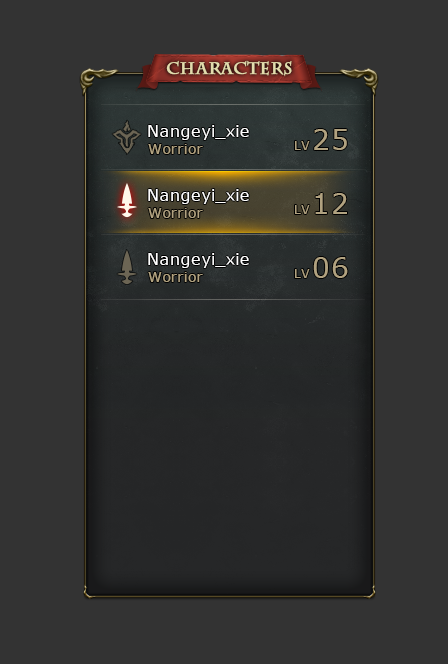
<style>
.page{position:relative;width:448px;height:664px;background:#333333}
.page>*{position:absolute;margin:0}
.t1{font:16px "CharlemagneStd-Bold";letter-spacing:0.03em;color:#e3dcad;font-weight:bold}
.t2{font:16px "Verdana";letter-spacing:0.03em;color:#ffffff}
.t3{font:28px "Verdana";letter-spacing:0.03em;color:#b1a280}
.t4{font:14px "Verdana";letter-spacing:0.03em;color:#b1a280}
.t5{font:12px "Verdana";letter-spacing:0.03em;color:#b1a280}
</style>
<div class="page">
<p class="t1" style="left:166px;top:60px;width:126px;height:16px">Characters</p>
<p class="t2" style="left:148px;top:125px;width:101px;height:15px">Nangeyi_xie</p>
<p class="t3" style="left:314px;top:129px;width:33px;height:21px">25</p>
<p class="t4" style="left:148px;top:144px;width:55px;height:10px">Worrior</p>
<p class="t5" style="left:295px;top:141px;width:15px;height:9px">LV</p>
<p class="t2" style="left:148px;top:189px;width:101px;height:15px">Nangeyi_xie</p>
<p class="t3" style="left:315px;top:193px;width:32px;height:21px">12</p>
<p class="t4" style="left:148px;top:208px;width:55px;height:10px">Worrior</p>
<p class="t5" style="left:295px;top:205px;width:15px;height:9px">LV</p>
<p class="t2" style="left:148px;top:253px;width:101px;height:15px">Nangeyi_xie</p>
<p class="t3" style="left:313px;top:257px;width:35px;height:21px">06</p>
<p class="t5" style="left:295px;top:269px;width:15px;height:9px">LV</p>
<p class="t4" style="left:148px;top:272px;width:55px;height:10px">Worrior</p>
</div>
